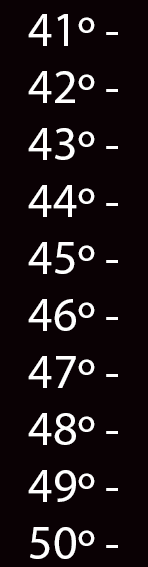
<style>
.page{position:relative;width:148px;height:567px;background:#0a0104}
.page>*{position:absolute;margin:0}
.t1{font:48px "MyriadPro-Regular";color:#ffffff}
</style>
<div class="page">
<p class="t1" style="left:28px;top:14px;width:90px;height:32px">41º -</p>
<p class="t1" style="left:28px;top:71px;width:90px;height:32px">42º -</p>
<p class="t1" style="left:28px;top:128px;width:90px;height:32px">43º -</p>
<p class="t1" style="left:28px;top:185px;width:90px;height:32px">44º -</p>
<p class="t1" style="left:28px;top:242px;width:90px;height:32px">45º -</p>
<p class="t1" style="left:28px;top:299px;width:90px;height:32px">46º -</p>
<p class="t1" style="left:28px;top:356px;width:90px;height:32px">47º -</p>
<p class="t1" style="left:28px;top:413px;width:90px;height:32px">48º -</p>
<p class="t1" style="left:28px;top:470px;width:90px;height:32px">49º -</p>
<p class="t1" style="left:30px;top:527px;width:88px;height:32px">50º -</p>
</div>
